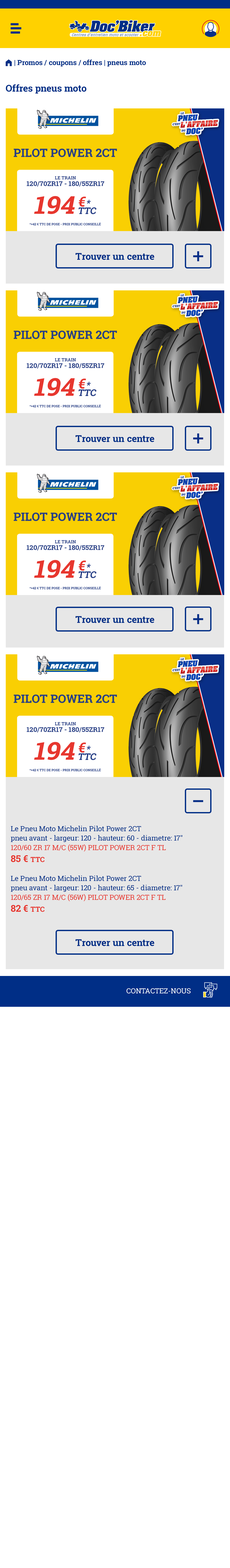
<style>
.page{position:relative;width:230px;height:1568px;background:#ffffff}
.page>*{position:absolute;margin:0}
.t1{font:7.1px "RobotoSlab-Bold";color:#002e86}
.t2{font:7.1px "FoundationIconsGeneral-Reg";color:#002e86}
.t3{font:9.5px "RobotoSlab-Bold";color:#002e86}
.t4{font:7.1px/9.5px "RobotoSlab-Regular";color:#002e86}
.t5{font:7.1px/7.1px "RobotoSlab-Regular";color:#002e86}
.t6{font:7.1px/9.5px "RobotoSlab-Regular";color:#e7372f}
.t7{font:9.5px/11.8px "RobotoSlab-Bold";color:#e7372f}
.t8{font:7.1px/11.8px "RobotoSlab-Bold";color:#e7372f}
.t9{font:7.1px "RobotoSlab-Regular";color:#ffffff;text-transform:uppercase}
</style>
<div class="page">
<p class="t1" style="left:6px;top:59px;width:140px;height:8px"><span class="t2">m </span>| Promos / coupons / offres | pneus moto</p>
<p class="t3" style="left:6px;top:84px;width:80px;height:10px">Offres pneus moto</p>
<p class="t3" style="left:75px;top:253px;width:79px;height:7px">Trouver un centre</p>
<p class="t3" style="left:75px;top:435px;width:79px;height:7px">Trouver un centre</p>
<p class="t3" style="left:75px;top:616px;width:79px;height:7px">Trouver un centre</p>
<p class="t4" style="left:11px;top:826px;width:171px;height:36px"><span class="t5">Le Pneu Moto Michelin Pilot Power 2CT<br></span>pneu avant - largeur: 120 - hauteur: 60 - diametre: 17"<br><span class="t6">120/60 ZR 17 M/C (55W) PILOT POWER 2CT F TL<br></span><span class="t7">85 € </span><span class="t8">TTC</span></p>
<p class="t4" style="left:11px;top:875px;width:171px;height:37px"><span class="t5">Le Pneu Moto Michelin Pilot Power 2CT<br></span>pneu avant - largeur: 120 - hauteur: 65 - diametre: 17"<br><span class="t6">120/65 ZR 17 M/C (56W) PILOT POWER 2CT F TL<br></span><span class="t7">82 € </span><span class="t8">TTC</span></p>
<p class="t3" style="left:75px;top:939px;width:79px;height:7px">Trouver un centre</p>
<p class="t9" style="left:126px;top:988px;width:64px;height:6px">contactez-nous</p>
</div>
